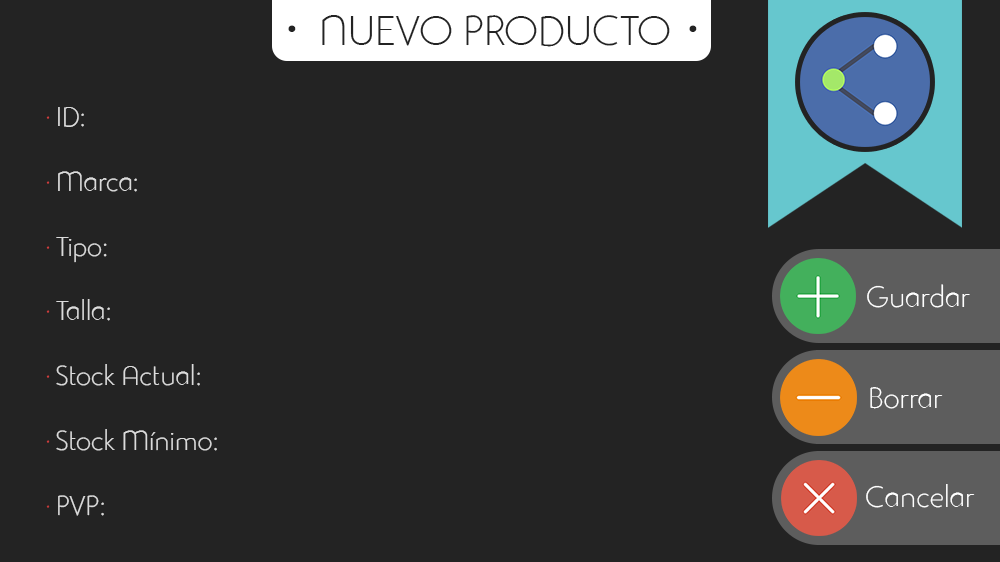
<style>
.page{position:relative;width:1000px;height:562px;background:#232323}
.page>*{position:absolute;margin:0}
.t1{font:41px "StudioGothicAlternateTrial-Extr";color:#232323}
.t2{font:97px "StudioGothicAlternateTrial-Extr";color:#232323}
.t3{font:27px "StudioGothicAlternateTrial-Extr";color:#dbdbdb}
.t4{font:27px "StudioGothicAlternateTrial-Extr";color:#d63f3f}
.t5{font:27px "StudioGothicAlternateTrial-Extr";color:#ca3b3b}
.t6{font:29px "StudioGothicAlternateTrial-Extr";color:#ffffff}
</style>
<div class="page">
<p class="t1" style="left:322px;top:15px;width:348px;height:32px">NUEVO PRODUCTO</p>
<p class="t2" style="left:288px;top:25px;width:409px;height:7px">·                 ·</p>
<p class="t3" style="left:46px;top:107px;width:171px;height:409px"><span class="t4">· </span>ID:<br><span class="t4"><br>· </span>Marca:<br><br><span class="t4">· </span>Tipo:<br><br><span class="t4">· </span>Talla:<br><span class="t4"><br>· </span>Stock Actual:<br><br><span class="t4">· </span>Stock Mínimo:<br><br><span class="t5">· </span>PVP:</p>
<p class="t6" style="left:867px;top:284px;width:103px;height:24px">Guardar</p>
<p class="t6" style="left:870px;top:387px;width:73px;height:22px">Borrar</p>
<p class="t6" style="left:866px;top:484px;width:109px;height:24px">Cancelar</p>
</div>
